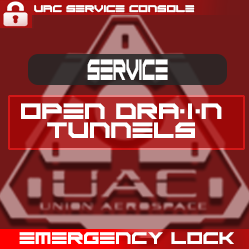
<style>
.page{position:relative;width:249px;height:249px;background:#731818}
.page>*{position:absolute;margin:0}
.t1{font:6.8px "ScifiAdventure";color:#ffffff}
.t2{font:20.5px "ScifiAdventure";color:#ffffff;scale:0.46 1}
.t3{font:15.6px "ScifiAdventure";color:#ffffff}
.t4{font:11.7px "ScifiAdventure";color:#ffffff}
</style>
<div class="page">
<p class="t1" style="left:34px;top:5px;width:161px;height:8px">UAC SERVICE CONSOLE</p>
<p class="t2" style="left:87px;top:59px;width:81px;height:21px">SERVICE</p>
<p class="t3" style="left:21px;top:103px;width:201px;height:35px;text-align:center">Open drain tunnels</p>
<p class="t4" style="left:19px;top:232px;width:215px;height:12px">EMERGENCY LOCK</p>
</div>
